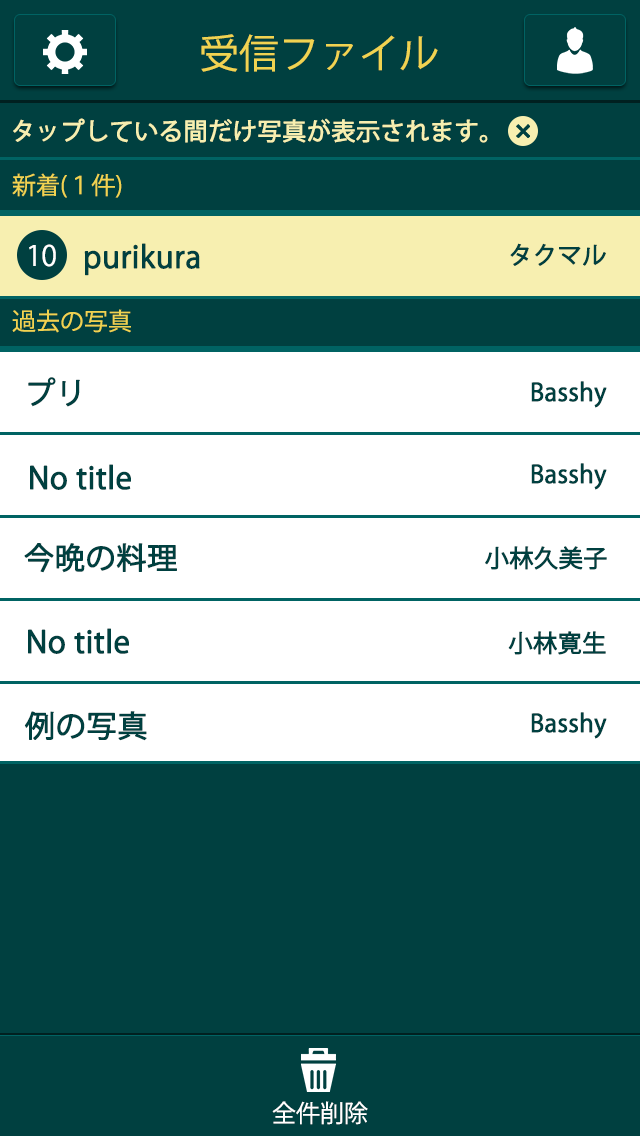
<style>
.page{position:relative;width:640px;height:1136px;background:#004040}
.page>*{position:absolute;margin:0}
.t1{font:40px "KozGoPr6N-Regular";color:#f0d351}
.t2{font:24px "KozGoPr6N-Regular";color:#f7efb0;font-weight:bold}
.t3{font:24px "KozGoPr6N-Regular";color:#f0d351}
.t4{font:28px "KozGoPr6N-Regular";color:#ffffff}
.t5{font:30px "KozGoPr6N-Regular";color:#004040;font-weight:bold}
.t6{font:24px "KozGoPr6N-Regular";color:#004040;font-weight:bold}
.t7{font:24px "KozGoPr6N-Regular";color:#ffffff}
</style>
<div class="page">
<p class="t1" style="left:201px;top:34px;width:237px;height:38px">受信ファイル</p>
<p class="t2" style="left:13px;top:118px;width:475px;height:25px">タップしている間だけ写真が表示されます。</p>
<p class="t3" style="left:12px;top:173px;width:110px;height:25px">新着(１件)</p>
<p class="t4" style="left:29px;top:244px;width:27px;height:23px">10</p>
<p class="t5" style="left:84px;top:243px;width:116px;height:33px">purikura</p>
<p class="t6" style="left:510px;top:243px;width:96px;height:23px">タクマル</p>
<p class="t3" style="left:12px;top:309px;width:119px;height:24px">過去の写真</p>
<p class="t5" style="left:28px;top:377px;width:52px;height:30px">プリ</p>
<p class="t6" style="left:531px;top:381px;width:76px;height:27px">Basshy</p>
<p class="t5" style="left:30px;top:464px;width:101px;height:26px">No title</p>
<p class="t6" style="left:531px;top:463px;width:76px;height:27px">Basshy</p>
<p class="t5" style="left:24px;top:543px;width:153px;height:30px">今晩の料理</p>
<p class="t6" style="left:485px;top:546px;width:122px;height:24px">小林久美子</p>
<p class="t5" style="left:28px;top:628px;width:101px;height:26px">No title</p>
<p class="t6" style="left:508px;top:631px;width:98px;height:24px">小林寛生</p>
<p class="t5" style="left:24px;top:711px;width:123px;height:30px">例の写真</p>
<p class="t6" style="left:531px;top:712px;width:76px;height:27px">Basshy</p>
<p class="t7" style="left:272px;top:1101px;width:96px;height:24px">全件削除</p>
</div>
